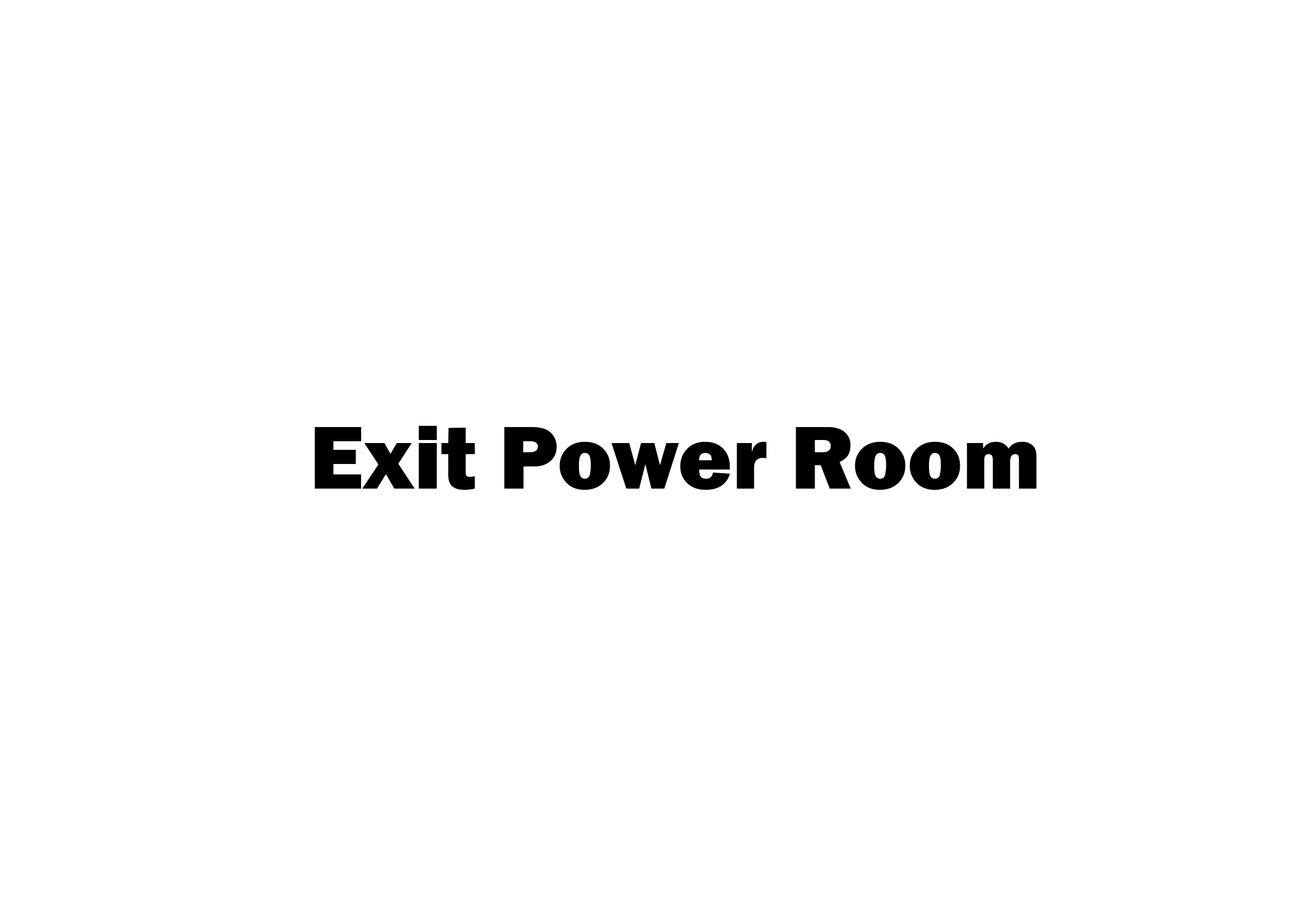
<style>
.page{position:relative;width:1292px;height:923px;background:#ffffff}
.page>*{position:absolute;margin:0}
.t1{font:92.3px "FranklinGothic-Heavy";color:#000000}
</style>
<div class="page">
<p class="t1" style="left:314px;top:426px;width:723px;height:64px">Exit Power Room</p>
</div>
